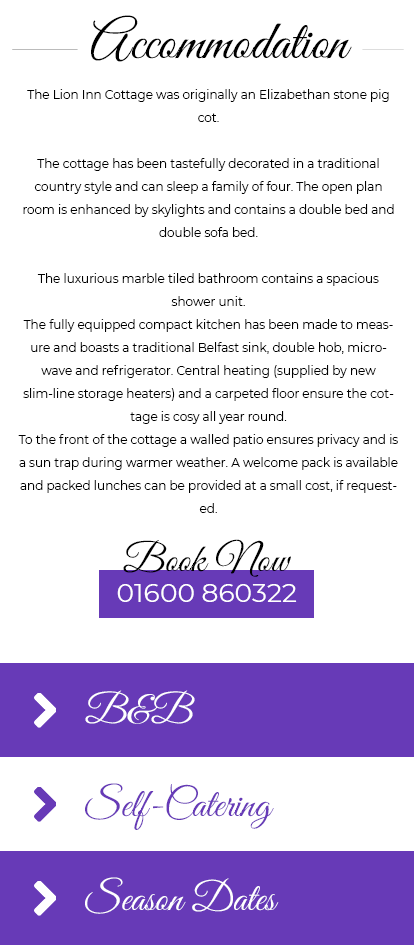
<style>
.page{position:relative;width:414px;height:945px;background:#ffffff}
.page>*{position:absolute;margin:0}
.t1{font:54.9px "GreatVibes-Regular";color:#000000}
.t2{font:12px/23px "Montserrat-Regular";color:#000000}
.t3{font:39.6px "GreatVibes-Regular";color:#000000}
.t4{font:26.4px "Montserrat-Regular";color:#ffffff}
.t5{font:40px "GreatVibes-Regular";color:#ffffff}
.t6{font:40px "GreatVibes-Regular";color:#673ab7}
</style>
<div class="page">
<p class="t1" style="left:91px;top:15px;width:261px;height:47px">Accommodation</p>
<p class="t2" style="left:18px;top:89px;width:380px;height:424px;text-align:center">The Lion Inn Cottage was originally an Elizabethan stone pig cot.<br><br>The cottage has been tastefully decorated in a traditional country style and can sleep a family of four. The open plan room is enhanced by skylights and contains a double bed and double sofa bed.<br><br>The luxurious marble tiled bathroom contains a spacious shower unit.<br>The fully equipped compact kitchen has been made to measure and boasts a traditional Belfast sink, double hob, microwave and refrigerator. Central heating (supplied by new slim-line storage heaters) and a carpeted floor ensure the cottage is cosy all year round.<br>To the front of the cottage a walled patio ensures privacy and is a sun trap during warmer weather. A welcome pack is available and packed lunches can be provided at a small cost, if requested.</p>
<p class="t3" style="left:123px;top:539px;width:168px;height:38px">Book Now</p>
<p class="t4" style="left:117px;top:584px;width:180px;height:18px">01600 860322</p>
<p class="t5" style="left:85px;top:690px;width:110px;height:34px">B&amp;B</p>
<p class="t6" style="left:85px;top:783px;width:189px;height:47px">Self-Catering</p>
<p class="t5" style="left:85px;top:877px;width:194px;height:37px">Season Dates</p>
</div>
